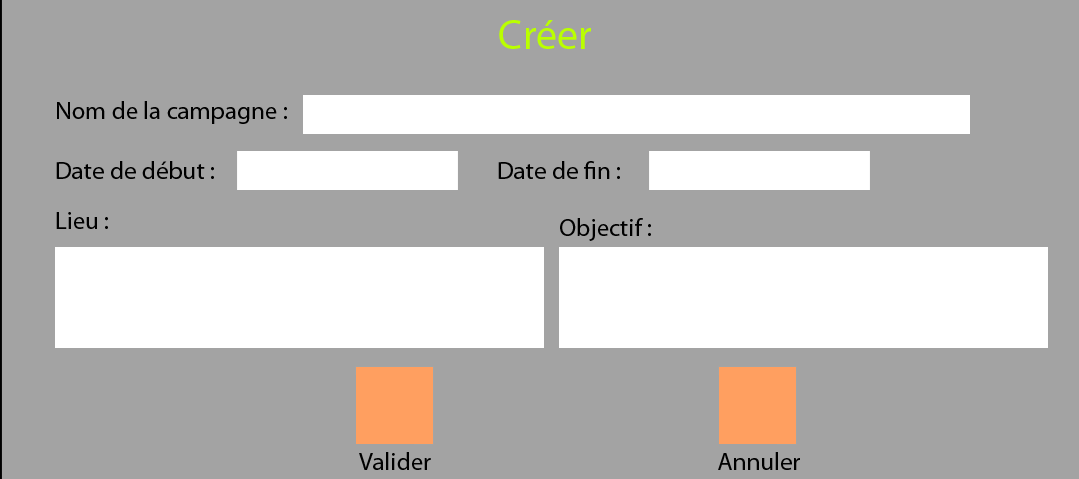
<style>
.page{position:relative;width:1079px;height:479px;background:#a3a3a3}
.page>*{position:absolute;margin:0}
.t1{font:41.7px "MyriadPro-Regular";color:#baff00}
.t2{font:25px "MyriadPro-Regular";color:#000000}
</style>
<div class="page">
<p class="t1" style="left:499px;top:20px;width:92px;height:29px">Créer</p>
<p class="t2" style="left:57px;top:101px;width:230px;height:23px">Nom de la campagne :</p>
<p class="t2" style="left:56px;top:161px;width:158px;height:18px">Date de début :</p>
<p class="t2" style="left:498px;top:161px;width:122px;height:18px">Date de fin :</p>
<p class="t2" style="left:56px;top:212px;width:52px;height:17px">Lieu :</p>
<p class="t2" style="left:560px;top:218px;width:91px;height:23px">Objectif :</p>
<p class="t2" style="left:359px;top:452px;width:72px;height:18px">Valider</p>
<p class="t2" style="left:718px;top:452px;width:82px;height:18px">Annuler</p>
</div>
